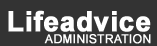
<style>
.page{position:relative;width:157px;height:46px;background:#333333}
.page>*{position:absolute;margin:0}
.t1{font:28px "Arial-BoldMT";color:#ffffff;font-weight:bold}
.t2{font:12px "ArialMT";color:#ffffff;font-weight:bold}
</style>
<div class="page">
<p class="t1" style="left:8px;top:10px;width:143px;height:22px">Lifeadvice</p>
<p class="t2" style="left:44px;top:34px;width:107px;height:10px">ADMINISTRATION</p>
</div>
